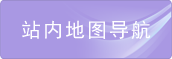
<style>
.page{position:relative;width:172px;height:59px;background:#a998e3}
.page>*{position:absolute;margin:0}
.t1{font:20px "SimHei";letter-spacing:0.1em;color:#ffffff}
</style>
<div class="page">
<p class="t1" style="left:22px;top:20px;width:129px;height:19px">站内地图导航</p>
</div>
